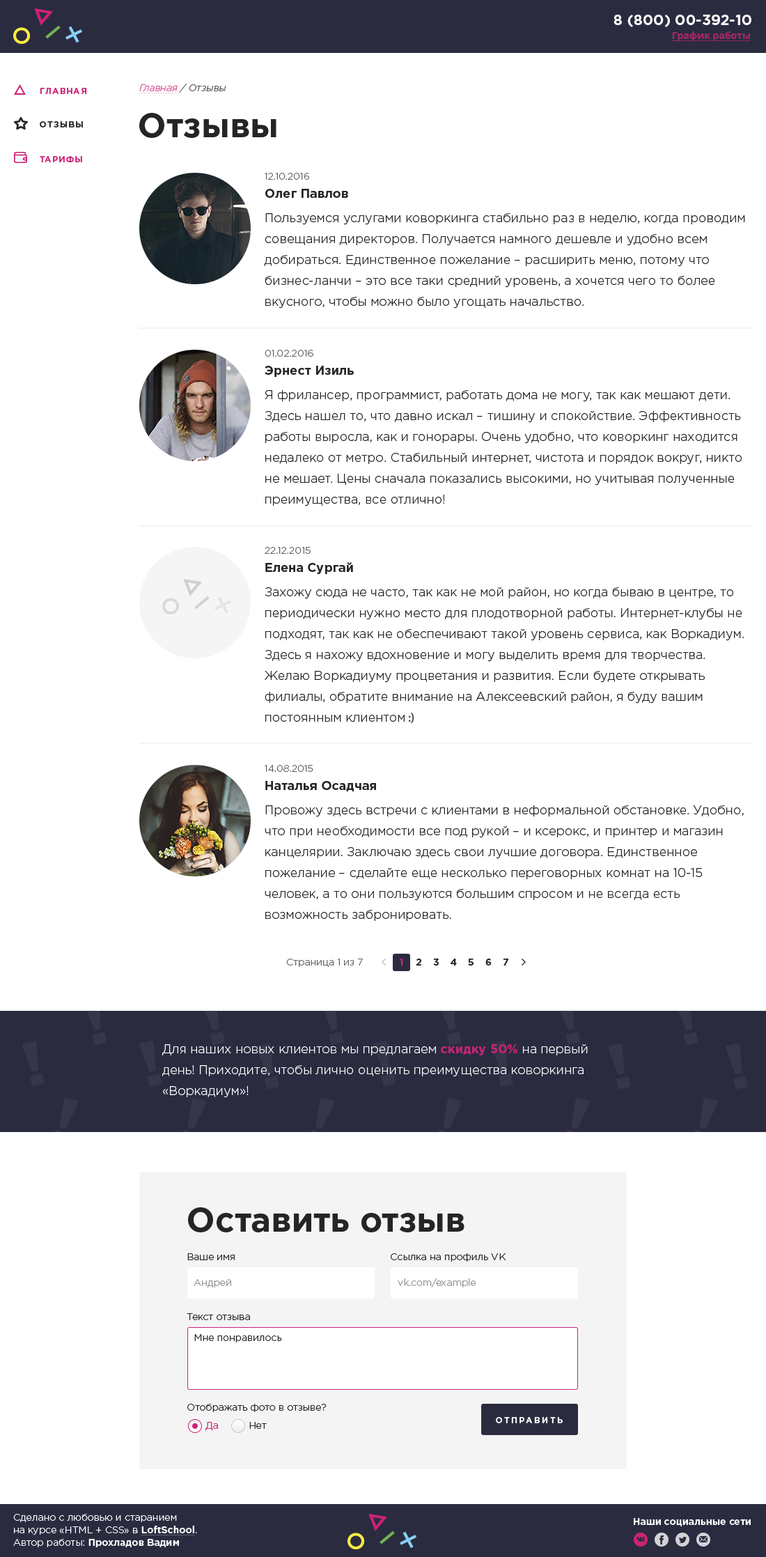
<style>
.page{position:relative;width:766px;height:1557px;background:#ffffff}
.page>*{position:absolute;margin:0}
.t1{font:14.6px "GothamPro-Bold";color:#ffffff;text-transform:uppercase}
.t2{font:9.8px "OpenSans-Bold";color:#a52568;text-decoration:underline}
.t3{font:8.4px "GothamPro-Bold";letter-spacing:0.1em;color:#cb2376;text-transform:uppercase}
.t4{font:9.8px "GothamPro-LightItalic"}
.t5{font:9.8px "GothamPro-LightItalic";text-decoration:underline}
.t6{font:34.1px "GothamPro-Bold";color:#262424}
.t7{font:8.4px "GothamPro-Bold";letter-spacing:0.1em;color:#262424;text-transform:uppercase}
.t8{font:12.5px/20.9px "GothamPro-Light";color:#262424}
.t9{font:9.8px/14.6px "GothamPro-Light";color:#656464}
.t10{font:12.5px/14.6px "GothamPro-Bold";color:#262424}
.t11{font:12.5px/20.9px "MyriadPro-Regular";color:#262424}
.t12{font:9.8px "GothamPro-Light";color:#656464}
.t13{font:9.8px "GothamPro-Bold";color:#cb2376}
.t14{font:9.8px "GothamPro-Bold";color:#262424}
.t15{font:12.5px/20.9px "GothamPro-Light";color:#ffffff}
.t16{font:12.5px/20.9px "GothamPro-Bold";color:#cb2376}
.t17{font:9.8px "GothamPro-Light";color:#262424}
.t18{font:9.8px "GothamPro-Light";color:#929191}
.t19{font:9.8px "GothamPro-Light";color:#cb2376}
.t20{font:8.4px "GothamPro-Bold";letter-spacing:0.2em;color:#ffffff;text-transform:uppercase}
.t21{font:9.8px/12.5px "GothamPro-Light";color:#ffffff}
.t22{font:9.8px/12.5px "GothamPro-Bold";color:#ffffff;text-decoration:underline}
.t23{font:9.8px/12.5px "GothamPro-Bold";color:#ffffff}
.t24{font:9.8px "GothamPro-Bold";color:#ffffff}
</style>
<div class="page">
<p class="t1" style="left:614px;top:15px;width:137px;height:12px">8 (800) 00-392-10</p>
<p class="t2" style="left:671px;top:31px;width:80px;height:10px">График работы</p>
<p class="t3" style="left:40px;top:88px;width:47px;height:6px">Главная</p>
<p class="t4" style="left:139px;top:84px;width:87px;height:9px"><span class="t5">Главная</span> / Отзывы</p>
<p class="t6" style="left:139px;top:113px;width:137px;height:25px">Отзывы</p>
<p class="t7" style="left:40px;top:121px;width:43px;height:6px">Отзывы</p>
<p class="t3" style="left:40px;top:156px;width:42px;height:6px">Тарифы</p>
<p class="t8" style="left:264px;top:173px;width:481px;height:136px"><span class="t9">12.10.2016<br></span><span class="t10">Олег Павлов<br></span>Пользуемся услугами коворкинга стабильно раз в неделю, когда проводим совещания директоров. Получается намного дешевле и удобно всем добираться. Единственное пожелание – расширить меню, потому что бизнес-ланчи – это все таки средний уровень, а хочется чего то более вкусного, чтобы можно было угощать начальство.</p>
<p class="t8" style="left:265px;top:350px;width:477px;height:156px"><span class="t9">01.02.2016<br></span><span class="t10">Эрнест Изиль<br></span>Я фрилансер, программист, работать дома не могу, так как мешают дети. Здесь нашел то, что давно искал – тишину и спокойствие. Эффективность работы выросла, как и гонорары. Очень удобно, что коворкинг находится недалеко от метро. Стабильный интернет, чистота и порядок вокруг, никто не мешает. Цены сначала показались высокими, но учитывая полученные преимущества, все отлично!</p>
<p class="t8" style="left:265px;top:547px;width:479px;height:176px"><span class="t9">22.12.2015<br></span><span class="t10">Елена Сургай<br></span>Захожу сюда не часто, так как не мой район, но когда бываю в центре, то периодически нужно место для плодотворной работы. Интернет-клубы не подходят, так как не обеспечивают такой уровень сервиса, как Воркадиум. Здесь я нахожу вдохновение и могу выделить время для творчества. Желаю Воркадиуму процветания и развития. Если будете открывать филиалы, обратите внимание на Алексеевский район, я буду вашим постоянным клиентом<span class="t11"> :)</span></p>
<p class="t8" style="left:265px;top:765px;width:479px;height:156px"><span class="t9">14.08.2015<br></span><span class="t10">Наталья Осадчая<br></span>Провожу здесь встречи с клиентами в неформальной обстановке. Удобно, что при необходимости все под рукой – и ксерокс, и принтер и магазин канцелярии. Заключаю здесь свои лучшие договора. Единственное пожелание – сделайте еще несколько переговорных комнат на 10-15 человек, а то они пользуются большим спросом и не всегда есть возможность забронировать.</p>
<p class="t12" style="left:286px;top:958px;width:77px;height:9px">Страница 1 из 7</p>
<p class="t13" style="left:400px;top:958px;width:3px;height:7px">1</p>
<p class="t14" style="left:416px;top:958px;width:5px;height:7px">2</p>
<p class="t14" style="left:433px;top:958px;width:6px;height:7px">3</p>
<p class="t14" style="left:451px;top:958px;width:6px;height:7px">4</p>
<p class="t14" style="left:468px;top:958px;width:6px;height:7px">5</p>
<p class="t14" style="left:485px;top:958px;width:7px;height:7px">6</p>
<p class="t14" style="left:504px;top:958px;width:4px;height:7px">7</p>
<p class="t15" style="left:162px;top:1044px;width:426px;height:54px">Для наших новых клиентов мы предлагаем <span class="t16">скидку 50%</span> на первый день! Приходите, чтобы лично оценить преимущества коворкинга «Воркадиум»!</p>
<p class="t6" style="left:188px;top:1207px;width:277px;height:25px">Оставить отзыв</p>
<p class="t17" style="left:187px;top:1253px;width:48px;height:7px">Ваше имя</p>
<p class="t17" style="left:391px;top:1253px;width:115px;height:8px">Ссылка на профиль VK</p>
<p class="t18" style="left:398px;top:1278px;width:78px;height:9px">vk.com/example</p>
<p class="t18" style="left:194px;top:1279px;width:37px;height:8px">Андрей</p>
<p class="t17" style="left:187px;top:1313px;width:63px;height:7px">Текст отзыва</p>
<p class="t17" style="left:194px;top:1334px;width:88px;height:8px">Мне понравилось</p>
<p class="t17" style="left:187px;top:1403px;width:140px;height:9px">Отображать фото в отзыве?</p>
<p class="t19" style="left:205px;top:1421px;width:13px;height:9px">Да</p>
<p class="t17" style="left:249px;top:1421px;width:18px;height:7px">Нет</p>
<p class="t20" style="left:496px;top:1417px;width:67px;height:6px">Отправить</p>
<p class="t21" style="left:13px;top:1513px;width:184px;height:34px">Сделано с любовью и старанием<br>на курсе «HTML + CSS» в <span class="t22">LoftSchool</span>.<br>Автор работы: <span class="t23">Прохладов Вадим</span></p>
<p class="t24" style="left:634px;top:1518px;width:117px;height:8px">Наши социальные сети</p>
</div>
